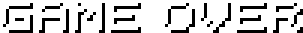
<style>
.page{position:relative;width:303px;height:33px;background:#ffffff}
.page>*{position:absolute;margin:0}
.t1{font:48px "Uni0553";color:#ffffff}
.t2{font:48px "Uni0553"}
</style>
<div class="page">
<p class="t1" style="left:0px;top:0px;width:300px;height:30px">GAME OVER</p>
<p class="t2" style="left:3px;top:3px;width:300px;height:30px">GAME OVER</p>
</div>
